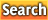
<style>
.page{position:relative;width:48px;height:20px}
.page>*{position:absolute;margin:0}
.t1{font:17px "Delicious-Heavy";color:#f9ffff}
</style>
<div class="page">
<p class="t1" style="left:2px;top:3px;width:44px;height:13px">Search</p>
</div>
